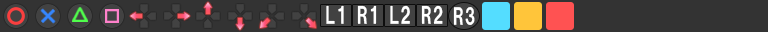
<style>
.page{position:relative;width:768px;height:32px;background:#333333}
.page>*{position:absolute;margin:0}
.t1{font:21.9px "HGSSoeiKakugothicUB";letter-spacing:0.05em;color:#ffffff;scale:0.82 1}
.t2{font:21.7px "HGSSoeiKakugothicUB";letter-spacing:0.05em;color:#ffffff;scale:0.82 1}
</style>
<div class="page">
<p class="t1" style="left:326px;top:5px;width:18px;height:19px">L1</p>
<p class="t1" style="left:357px;top:5px;width:20px;height:19px">R1</p>
<p class="t1" style="left:390px;top:5px;width:20px;height:19px">L2</p>
<p class="t1" style="left:421px;top:5px;width:22px;height:19px">R2</p>
<p class="t2" style="left:453px;top:7px;width:22px;height:18px">R3</p>
</div>
